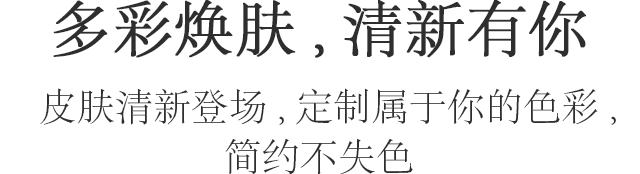
<style>
.page{position:relative;width:640px;height:174px;background:#ffffff}
.page>*{position:absolute;margin:0}
.t1{font:60px "AdobeSongStd-Light";color:#2e2e2e;font-weight:bold}
.t2{font:38px "AdobeSongStd-Light";color:#2e2e2e}
</style>
<div class="page">
<p class="t1" style="left:53px;top:0px;width:533px;height:58px">多彩焕肤,清新有你</p>
<p class="t2" style="left:40px;top:88px;width:576px;height:37px">皮肤清新登场,定制属于你的色彩,</p>
<p class="t2" style="left:225px;top:138px;width:188px;height:37px">简约不失色</p>
</div>
